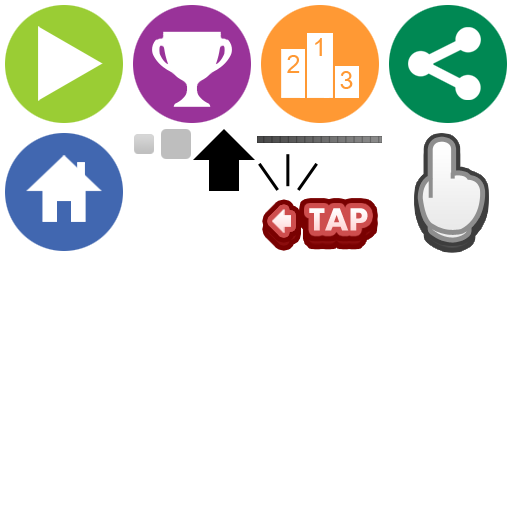
<style>
.page{position:relative;width:512px;height:512px;background:#ffffff}
.page>*{position:absolute;margin:0}
.t1{font:25px "ArialUnicodeMS";color:#ff9934}
.t2{font:33.2px "Aharoni-Bold";color:#ffffff}
</style>
<div class="page">
<p class="t1" style="left:315px;top:38px;width:7px;height:18px">1</p>
<p class="t1" style="left:287px;top:55px;width:13px;height:18px">2</p>
<p class="t1" style="left:340px;top:71px;width:13px;height:18px">3</p>
<p class="t2" style="left:309px;top:208px;width:59px;height:23px">TAP</p>
</div>
